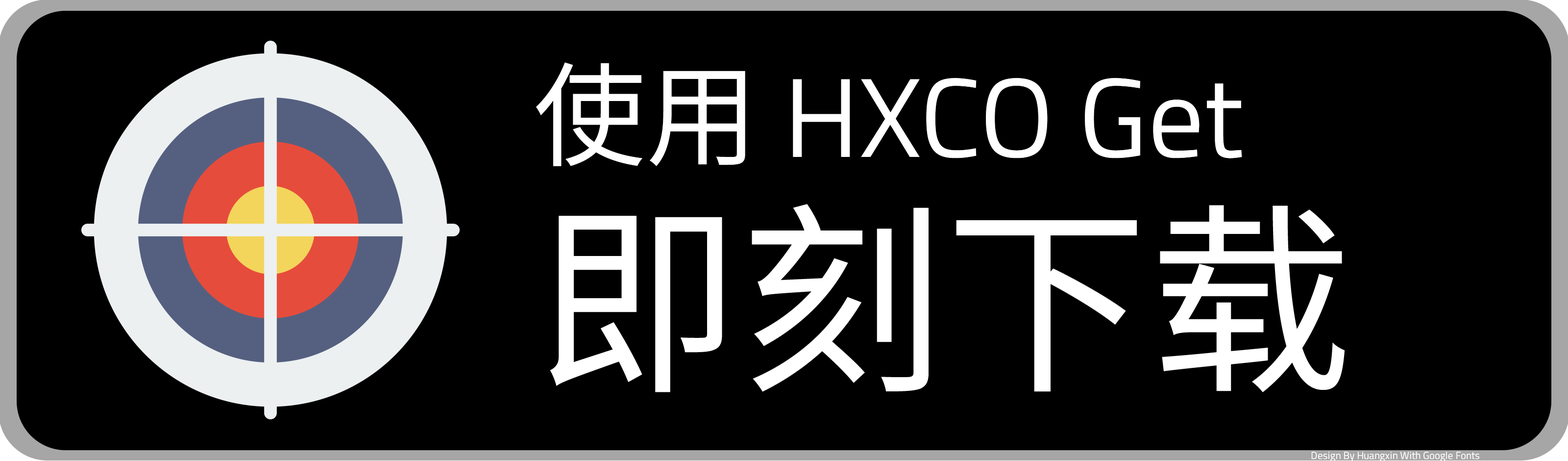
<style>
.page{position:relative;width:1568px;height:461px;background:#000000}
.page>*{position:absolute;margin:0}
.t1{font:112.3px "TitilliumWeb-Regular";color:#ffffff}
.t2{font:112.3px "SourceHanSansSC-Regular";color:#ffffff}
.t3{font:204.2px "SourceHanSansSC-Regular";color:#ffffff}
.t4{font:10.2px "TitilliumWeb-Regular";color:#ffffff}
</style>
<div class="page">
<p class="t1" style="left:536px;top:62px;width:706px;height:104px"><span class="t2">使用 </span>HXCO Get</p>
<p class="t3" style="left:550px;top:204px;width:795px;height:188px">即刻下载</p>
<p class="t4" style="left:1311px;top:451px;width:168px;height:10px">Design By Huangxin With Google Fonts</p>
</div>
